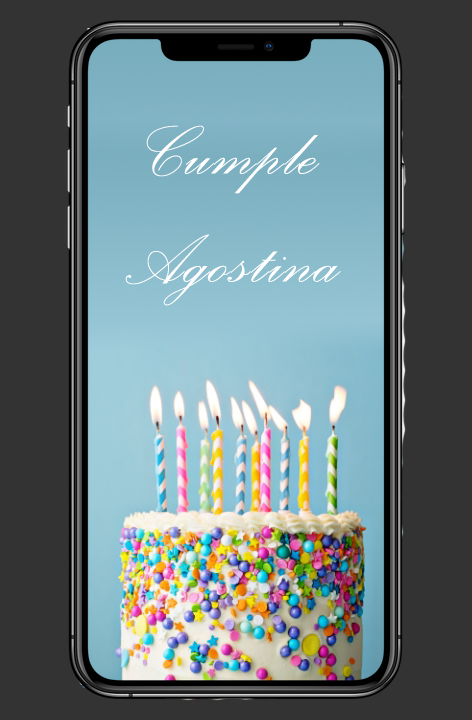
<style>
.page{position:relative;width:472px;height:720px;background:#333333}
.page>*{position:absolute;margin:0}
.t1{font:90px "PalaceScriptMT";letter-spacing:0.017em;color:#ffffff}
</style>
<div class="page">
<p class="t1" style="left:125px;top:125px;width:216px;height:181px;text-align:center">Cumple<br>Agostina</p>
</div>
